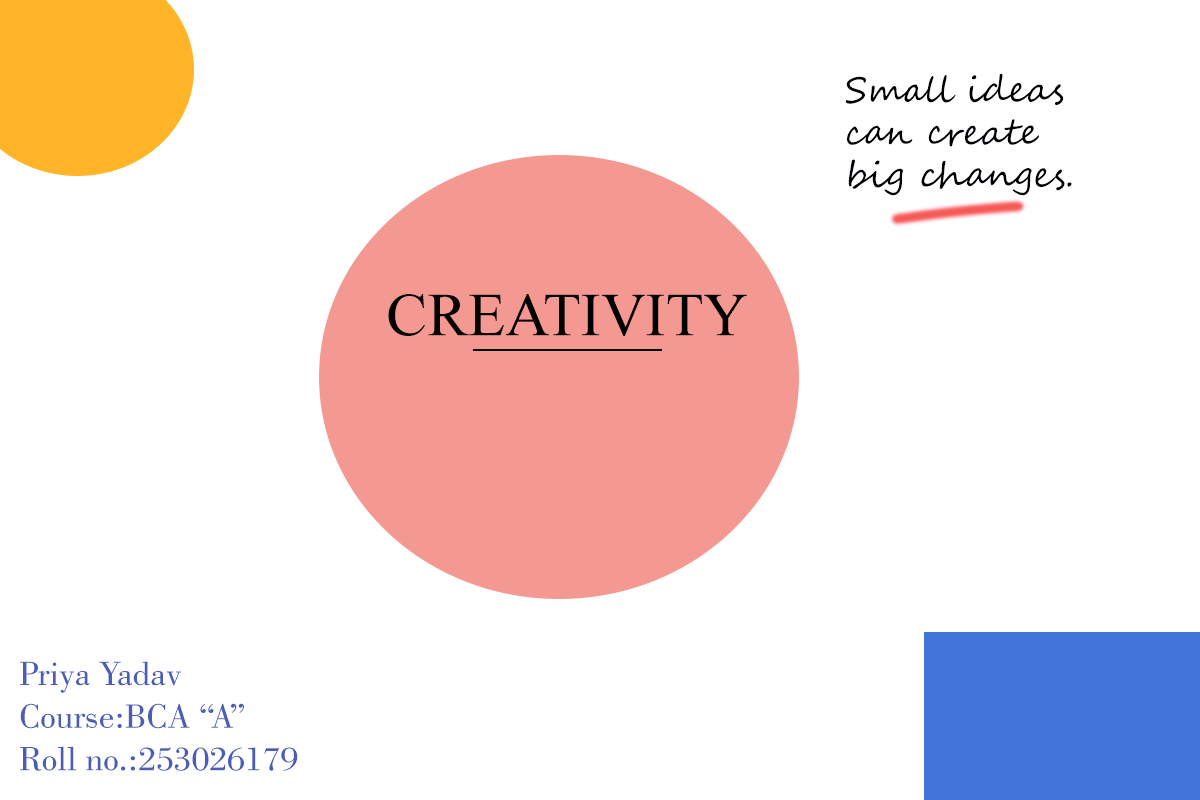
<style>
.page{position:relative;width:1200px;height:800px;background:#ffffff}
.page>*{position:absolute;margin:0}
.t1{font:35.6px "SegoeScript";color:#040508}
.t2{font:61px "TimesNewRomanPSMT";color:#040508}
.t3{font:35.6px "BodoniBT-Book";color:#5462af}
</style>
<div class="page">
<p class="t1" style="left:845px;top:73px;width:227px;height:123px">Small ideas<br>can create<br>big changes.</p>
<p class="t2" style="left:388px;top:294px;width:359px;height:42px">CREATIVITY</p>
<p class="t3" style="left:20px;top:661px;width:278px;height:110px">Priya Yadav<br>Course:BCA “A”<br>Roll no.:253026179</p>
</div>
